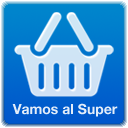
<style>
.page{position:relative;width:128px;height:128px}
.page>*{position:absolute;margin:0}
.t1{font:14px "HelveticaNeue-Bold";color:#e3edf9}
</style>
<div class="page">
<p class="t1" style="left:12px;top:103px;width:106px;height:14px">Vamos al Super</p>
</div>
